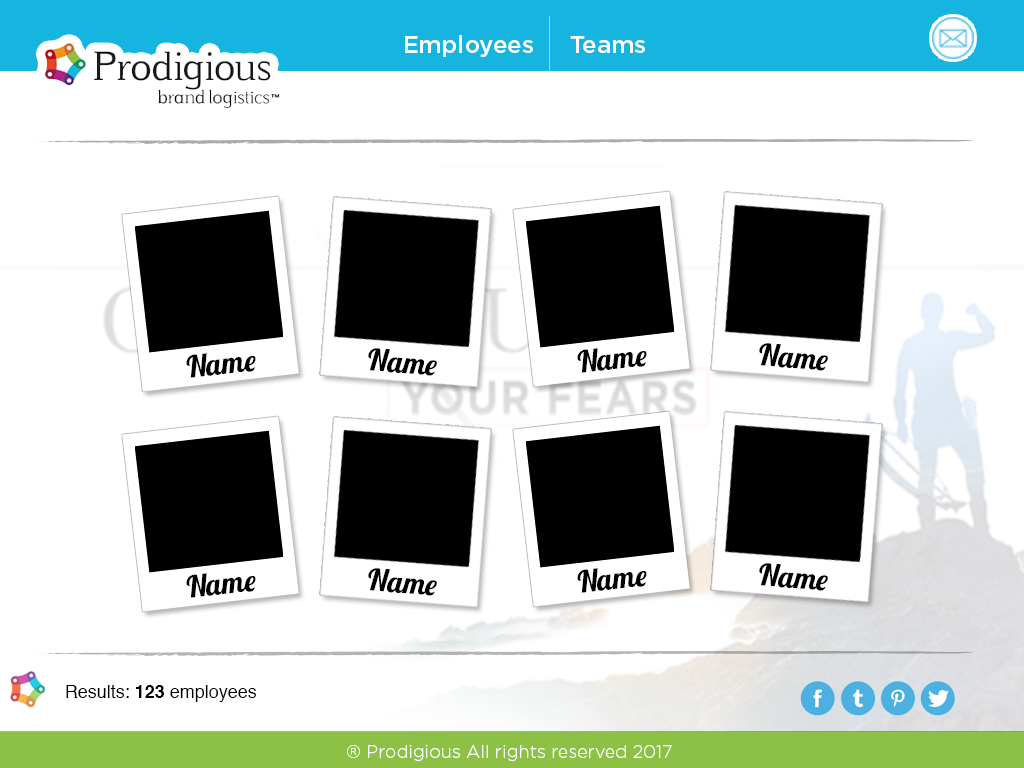
<style>
.page{position:relative;width:1024px;height:768px;background:#ffffff}
.page>*{position:absolute;margin:0}
.t1{font:24px "GothamMedium";color:#ffffff}
.t2{font:30px "Lobster1.4";color:#000000}
.t3{font:18px "Helvetica";color:#000000}
.t4{font:18px "Helvetica-Bold";color:#000000}
.t5{font:18px "GothamLight";color:#ffffff}
</style>
<div class="page">
<p class="t1" style="left:405px;top:35px;width:240px;height:22px">Employees     Teams</p>
<p class="t2" style="left:186px;top:353px;width:70px;height:25px;rotate:-7deg">Name</p>
<p class="t2" style="left:368px;top:348px;width:69px;height:28px;rotate:4deg">Name</p>
<p class="t2" style="left:577px;top:348px;width:70px;height:25px;rotate:-7deg">Name</p>
<p class="t2" style="left:759px;top:343px;width:69px;height:28px;rotate:4deg">Name</p>
<p class="t2" style="left:368px;top:568px;width:69px;height:28px;rotate:4deg">Name</p>
<p class="t2" style="left:577px;top:568px;width:70px;height:25px;rotate:-7deg">Name</p>
<p class="t2" style="left:759px;top:563px;width:69px;height:28px;rotate:4deg">Name</p>
<p class="t2" style="left:186px;top:573px;width:70px;height:25px;rotate:-7deg">Name</p>
<p class="t3" style="left:66px;top:685px;width:190px;height:17px">Results: <span class="t4">123</span> employees</p>
<p class="t5" style="left:347px;top:745px;width:325px;height:17px">® Prodigious All rights reserved 2017</p>
</div>
